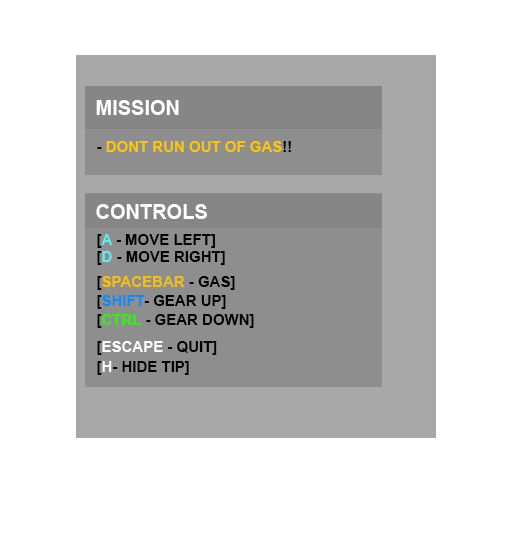
<style>
.page{position:relative;width:512px;height:544px;background:#ffffff}
.page>*{position:absolute;margin:0}
.t1{font:20px "Arial-BoldMT";color:#ffffff}
.t2{font:15px "Arial-BoldMT";color:#ffc600}
.t3{font:15px "Arial-BoldMT";color:#000000}
.t4{font:15px "Arial-BoldMT";color:#5eeef3}
.t5{font:15px "Arial-BoldMT";color:#f4c00b}
.t6{font:15px "Arial-BoldMT";color:#0c89fe}
.t7{font:15px "Arial-BoldMT";color:#23f800}
.t8{font:15px "Arial-BoldMT";color:#ffffff}
</style>
<div class="page">
<p class="t1" style="left:96px;top:100px;width:83px;height:15px">MISSION</p>
<p class="t2" style="left:97px;top:141px;width:194px;height:11px"><span class="t3">- </span>DONT RUN OUT OF GAS<span class="t3">!!</span></p>
<p class="t1" style="left:96px;top:204px;width:111px;height:15px">CONTROLS</p>
<p class="t3" style="left:97px;top:234px;width:118px;height:14px">[<span class="t4">A</span> - MOVE LEFT]</p>
<p class="t3" style="left:97px;top:251px;width:128px;height:14px">[<span class="t4">D </span>- MOVE RIGHT]</p>
<p class="t5" style="left:97px;top:276px;width:138px;height:14px"><span class="t3">[</span>SPACEBAR<span class="t3"> - GAS]</span></p>
<p class="t3" style="left:97px;top:295px;width:129px;height:14px">[<span class="t6">SHIFT</span>- GEAR UP]</p>
<p class="t3" style="left:97px;top:314px;width:157px;height:14px">[<span class="t7">CTRL </span>- GEAR DOWN]</p>
<p class="t3" style="left:97px;top:361px;width:92px;height:14px">[<span class="t8">H</span>- HIDE TIP]</p>
</div>
